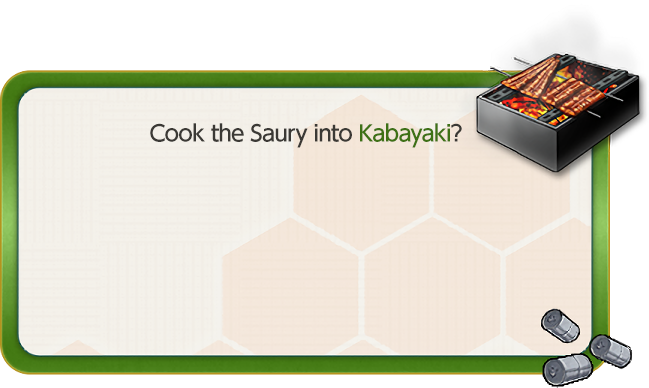
<style>
.page{position:relative;width:649px;height:388px;background:#ffffff}
.page>*{position:absolute;margin:0}
.t1{font:22px "UDShinGoPro-Medium";letter-spacing:-0.04em;color:#3b3935}
.t2{font:22px "UDShinGoPro-Medium";letter-spacing:-0.04em;color:#3e7115}
</style>
<div class="page">
<p class="t1" style="left:150px;top:123px;width:312px;height:25px">Cook the Saury into <span class="t2">Kabayaki</span>?</p>
</div>
